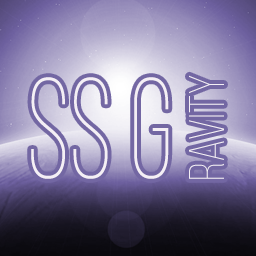
<style>
.page{position:relative;width:256px;height:256px}
.page>*{position:absolute;margin:0}
.t1{font:143px "BebasNeueLight";color:#ffffff;scale:0.81 1}
.t2{font:50px "BebasNeueLight";color:#ffffff}
</style>
<div class="page">
<p class="t1" style="left:31px;top:77px;width:138px;height:102px">SS G</p>
<p class="t2" style="left:189px;top:75px;width:35px;height:104px;rotate:-90deg">ravity</p>
</div>
